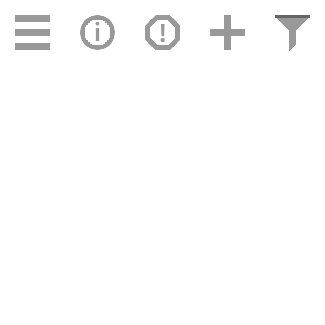
<style>
.page{position:relative;width:325px;height:325px;background:#ffffff}
.page>*{position:absolute;margin:0}
.t1{font:25.8px "ClearSans-Bold";color:#999999}
</style>
<div class="page">
<p class="t1" style="left:95px;top:22px;width:5px;height:19px">i</p>
<p class="t1" style="left:160px;top:24px;width:5px;height:18px">!</p>
</div>
